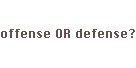
<style>
.page{position:relative;width:136px;height:68px;background:#ffffff}
.page>*{position:absolute;margin:0}
.t1{font:12.4px "ChicagoFLF";color:#65524d}
</style>
<div class="page">
<p class="t1" style="left:1px;top:29px;width:134px;height:9px">offense OR defense?</p>
</div>
